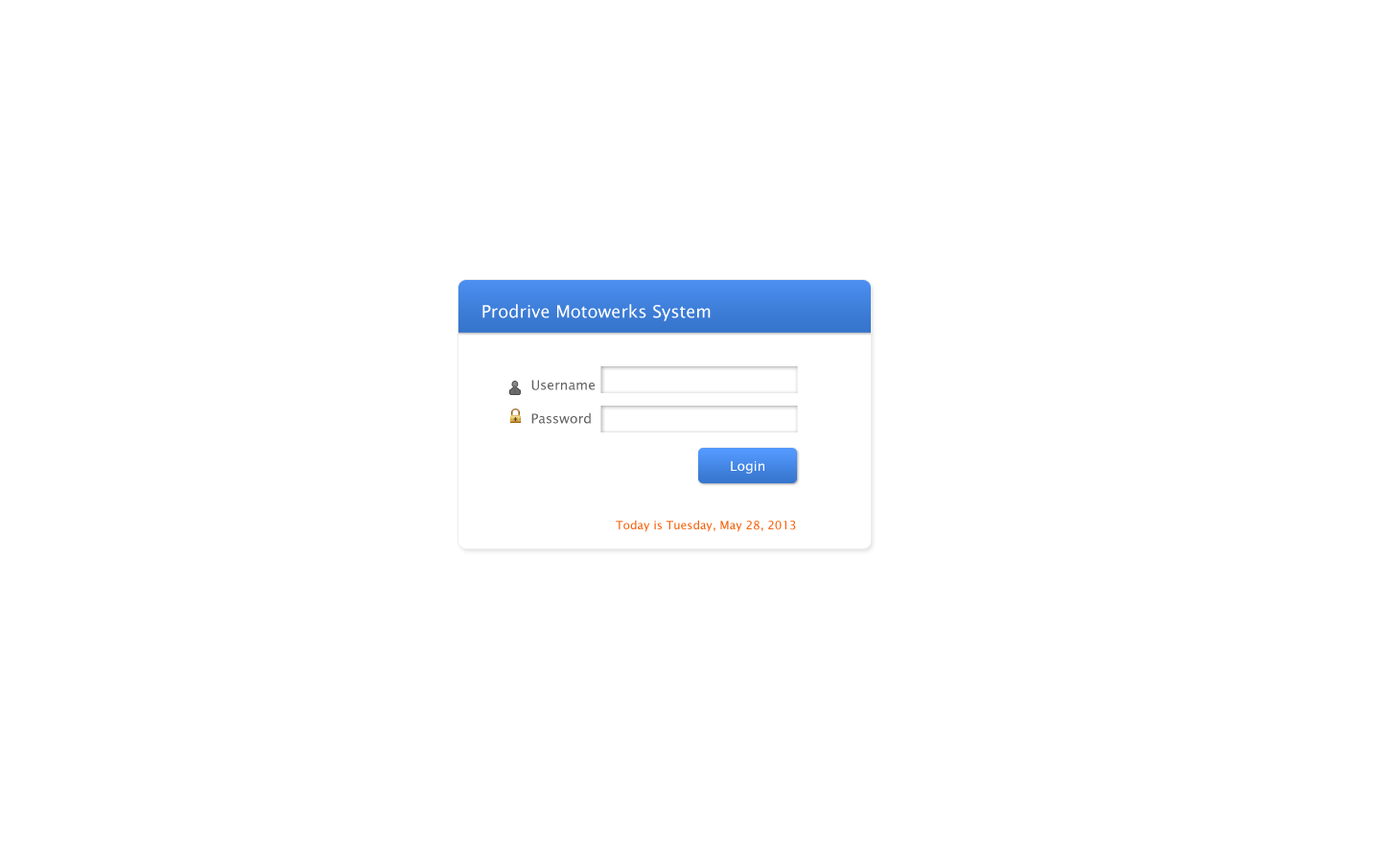
<style>
.page{position:relative;width:1381px;height:863px;background:#ffffff}
.page>*{position:absolute;margin:0}
.t1{font:17.3px "LucidaSansUnicode";color:#ffffff}
.t2{font:13.4px/33.6px "LucidaSansUnicode";color:#636363}
.t3{font:13.4px "LucidaSansUnicode";color:#ffffff}
.t4{font:11.5px "LucidaSansUnicode";color:#f4640f}
</style>
<div class="page">
<p class="t1" style="left:482px;top:304px;width:229px;height:17px">Prodrive Motowerks System</p>
<p class="t2" style="left:531px;top:380px;width:64px;height:44px">Username<br>Password</p>
<p class="t3" style="left:731px;top:461px;width:33px;height:13px">Login</p>
<p class="t4" style="left:616px;top:520px;width:180px;height:12px">Today is Tuesday, May 28, 2013</p>
</div>
